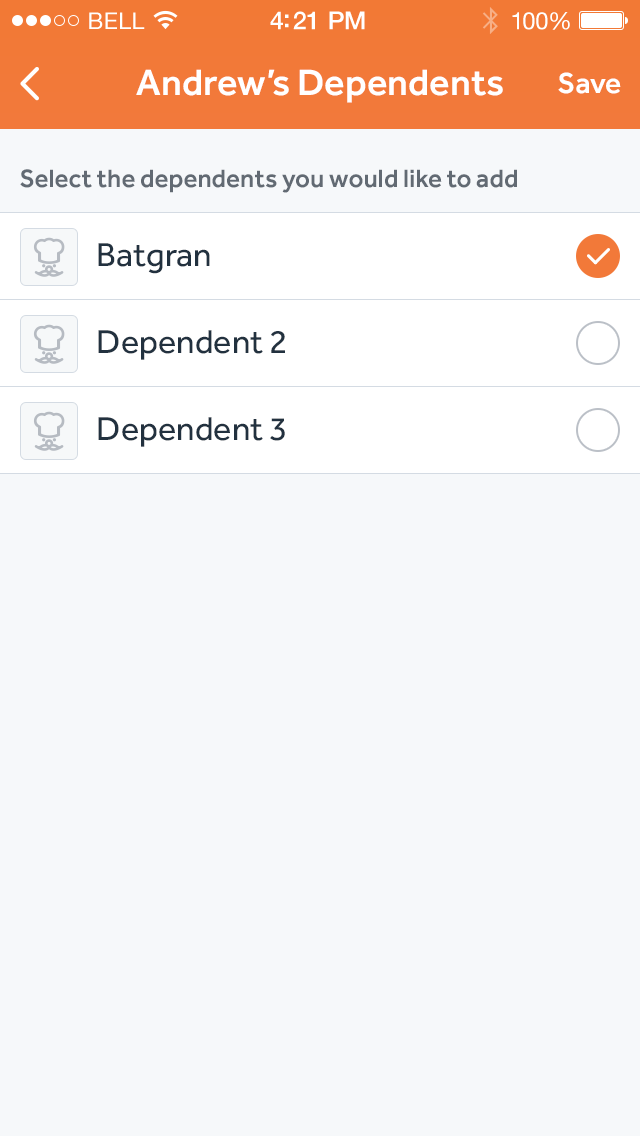
<style>
.page{position:relative;width:640px;height:1136px;background:#f6f8fa}
.page>*{position:absolute;margin:0}
.t1{font:23px "HelveticaNeue";letter-spacing:0.02em;color:#ffffff}
.t2{font:25px "HelveticaNeue-Medium";letter-spacing:-0.02em;color:#ffffff}
.t3{font:24px "HelveticaNeue";letter-spacing:-0.02em;color:#ffffff}
.t4{font:38px "Effra-Medium";color:#ffffff}
.t5{font:30px "Effra-Medium";color:#ffffff}
.t6{font:26px "Effra-Medium";color:#626a73}
.t7{font:34px "Effra-Regular";color:#22313f}
</style>
<div class="page">
<p class="t1" style="left:89px;top:12px;width:56px;height:17px">BELL</p>
<p class="t2" style="left:270px;top:11px;width:95px;height:19px">4:21 PM</p>
<p class="t3" style="left:512px;top:12px;width:58px;height:18px">100%</p>
<p class="t4" style="left:136px;top:69px;width:367px;height:34px">Andrew’s Dependents</p>
<p class="t5" style="left:558px;top:72px;width:63px;height:22px">Save</p>
<p class="t6" style="left:20px;top:169px;width:497px;height:24px">Select the dependents you would like to add</p>
<p class="t7" style="left:98px;top:243px;width:112px;height:31px">Batgran</p>
<p class="t7" style="left:98px;top:330px;width:187px;height:30px">Dependent 2</p>
<p class="t7" style="left:98px;top:417px;width:187px;height:30px">Dependent 3</p>
</div>
